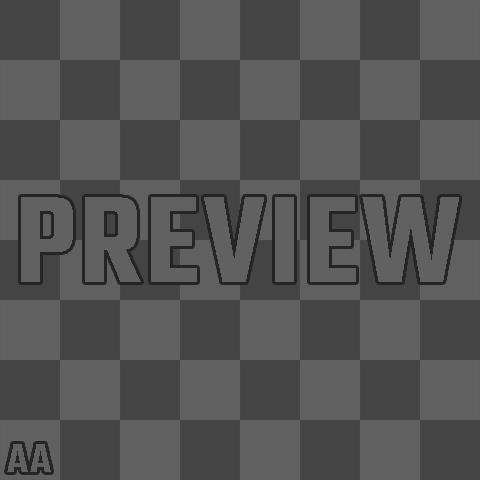
<style>
.page{position:relative;width:480px;height:480px;background:#444444}
.page>*{position:absolute;margin:0}
.t1{font:133.1px "Teko-SemiBold";letter-spacing:0.025em;color:#616161}
.t2{font:43.6px "Teko-SemiBold";letter-spacing:0.025em;color:#616161}
</style>
<div class="page">
<p class="t1" style="left:21px;top:197px;width:438px;height:85px">PREVIEW</p>
<p class="t2" style="left:7px;top:444px;width:44px;height:28px">AA</p>
</div>
